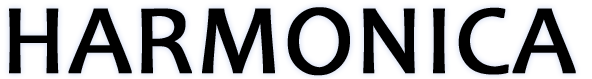
<style>
.page{position:relative;width:592px;height:79px;background:#ffffff}
.page>*{position:absolute;margin:0}
.t1{font:99.6px "Candara";color:#000000;font-weight:bold}
</style>
<div class="page">
<p class="t1" style="left:9px;top:7px;width:567px;height:69px">HARMONICA</p>
</div>
